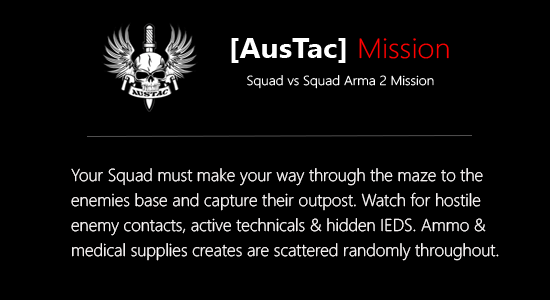
<style>
.page{position:relative;width:550px;height:300px;background:#000000}
.page>*{position:absolute;margin:0}
.t1{font:17.3px/25px "SegoeUI-Light";color:#fcf9f9}
</style>
<div class="page">
<p class="t1" style="left:71px;top:168px;width:428px;height:93px">Your Squad must make your way through the maze to the enemies base and capture their outpost. Watch for hostile enemy contacts, active technicals &amp; hidden IEDS. Ammo &amp; medical supplies creates are scattered randomly throughout.</p>
</div>
